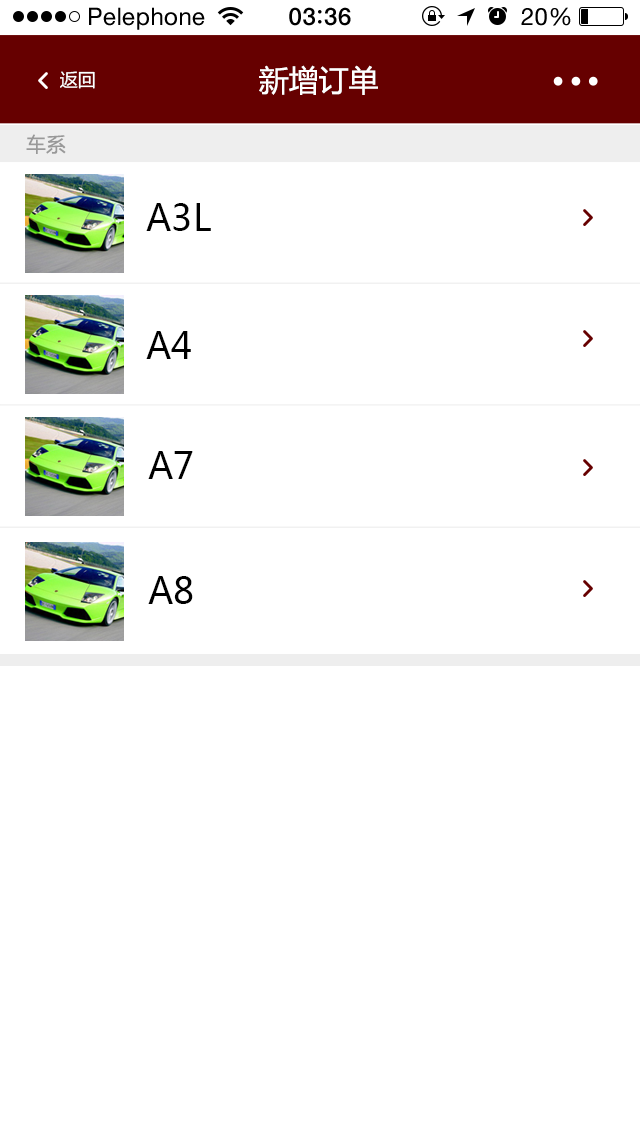
<style>
.page{position:relative;width:640px;height:1138px;background:#ffffff}
.page>*{position:absolute;margin:0}
.t1{font:24px "HelveticaNeue";letter-spacing:0.02em;color:#000000}
.t2{font:24px "HelveticaNeue-Medium";letter-spacing:0.03em;color:#000000}
.t3{font:29.9px "MicrosoftYaHei";color:#ffffff}
.t4{font:18px "MicrosoftYaHei";color:#ffffff}
.t5{font:20px "MicrosoftYaHei";color:#999999}
.t6{font:36px "MicrosoftYaHei";color:#000000}
</style>
<div class="page">
<p class="t1" style="left:89px;top:7px;width:116px;height:23px">Pelephone</p>
<p class="t2" style="left:289px;top:7px;width:62px;height:19px">03 36</p>
<p class="t1" style="left:521px;top:7px;width:50px;height:19px">20%</p>
<p class="t3" style="left:259px;top:65px;width:119px;height:30px">新增订单</p>
<p class="t4" style="left:60px;top:71px;width:35px;height:18px">返回</p>
<p class="t5" style="left:26px;top:134px;width:40px;height:20px">车系</p>
<p class="t6" style="left:146px;top:203px;width:65px;height:28px">A3L</p>
<p class="t6" style="left:146px;top:331px;width:45px;height:28px">A4</p>
<p class="t6" style="left:148px;top:451px;width:45px;height:28px">A7</p>
<p class="t6" style="left:148px;top:576px;width:45px;height:28px">A8</p>
</div>
